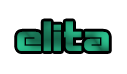
<style>
.page{position:relative;width:127px;height:74px;background:#ffffff}
.page>*{position:absolute;margin:0}
.t1{font:41.7px "AksentNormal"}
</style>
<div class="page">
<p class="t1" style="left:17px;top:21px;width:92px;height:30px">elita</p>
</div>
